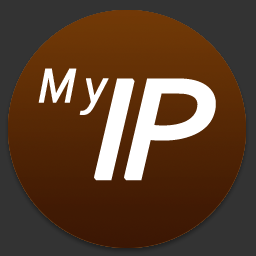
<style>
.page{position:relative;width:256px;height:256px;background:#333333}
.page>*{position:absolute;margin:0}
.t1{font:51.4px "Corbel-Italic";letter-spacing:0.14em;color:#ffffff;font-weight:bold;scale:0.93 1}
.t2{font:148.7px "Corbel-Italic";letter-spacing:-0.1em;color:#ffffff;font-weight:bold;scale:1.13 1}
</style>
<div class="page">
<p class="t1" style="left:38px;top:68px;width:71px;height:47px">My</p>
<p class="t2" style="left:94px;top:78px;width:122px;height:103px">IP</p>
</div>
